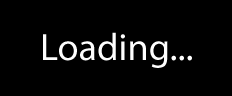
<style>
.page{position:relative;width:232px;height:96px;background:#000000}
.page>*{position:absolute;margin:0}
.t1{font:38.3px "MyriadPro-Regular";color:#fefefe}
</style>
<div class="page">
<p class="t1" style="left:43px;top:32px;width:149px;height:36px">Loading...</p>
</div>
